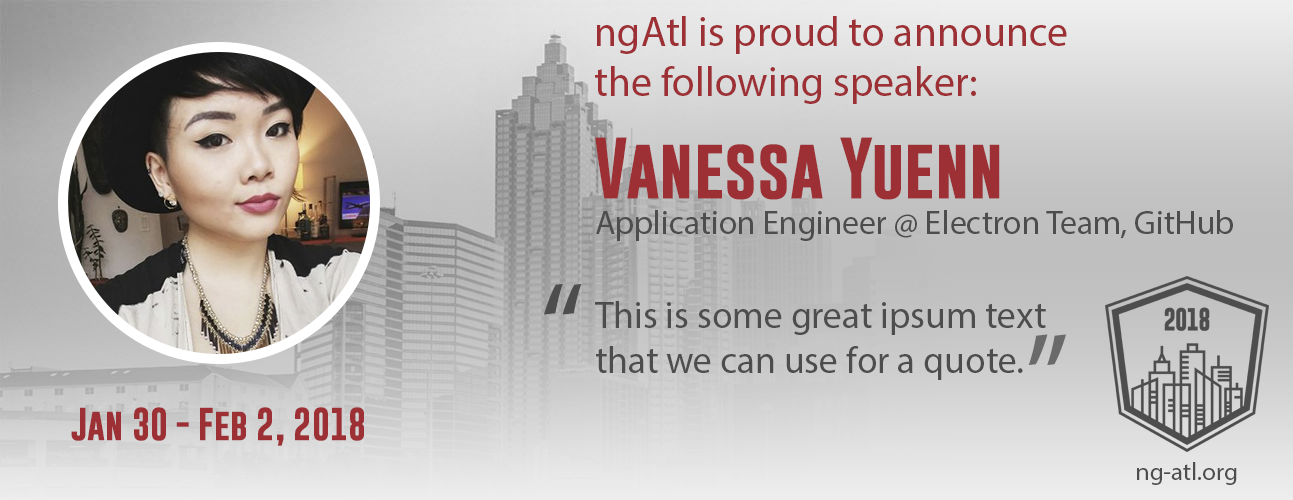
<style>
.page{position:relative;width:1293px;height:500px}
.page>*{position:absolute;margin:0}
.t1{font:41.7px "MyriadPro-Regular";color:#9d3035}
.t2{font:62.5px "GoboldBold";color:#9d3035}
.t3{font:33.3px "MyriadPro-Regular";color:#4d4d4e}
.t4{font:125px "MyriadPro-Regular";color:#4d4d4e}
.t5{font:37.5px "MyriadPro-Regular";color:#4d4d4e}
.t6{font:125px "MyriadPro-Regular";color:#6a6a6b}
.t7{font:33.3px "GoboldBold";color:#9d3035}
.t8{font:25px "MyriadPro-Regular";color:#4d4d4e}
</style>
<div class="page">
<p class="t1" style="left:595px;top:16px;width:472px;height:88px">ngAtl is proud to announce the following speaker:</p>
<p class="t2" style="left:595px;top:137px;width:405px;height:63px">Vanessa Yuenn</p>
<p class="t3" style="left:596px;top:210px;width:637px;height:31px">Application Engineer @ Electron Team, GitHub</p>
<p class="t4" style="left:544px;top:283px;width:38px;height:32px">“</p>
<p class="t5" style="left:595px;top:301px;width:451px;height:79px">This is some great ipsum text that we can use for a quote.</p>
<p class="t6" style="left:1028px;top:334px;width:38px;height:32px;rotate:180deg">“</p>
<p class="t7" style="left:71px;top:407px;width:293px;height:39px">Jan 30 - Feb 2, 2018</p>
<p class="t8" style="left:1137px;top:462px;width:100px;height:23px">ng-atl.org</p>
</div>
